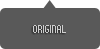
<style>
.page{position:relative;width:100px;height:49px;background:#595959}
.page>*{position:absolute;margin:0}
.t1{font:9.3px "11pxbus";color:#cecece}
</style>
<div class="page">
<p class="t1" style="left:33px;top:25px;width:33px;height:8px">original</p>
</div>
